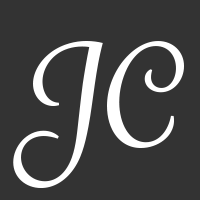
<style>
.page{position:relative;width:200px;height:200px;background:#333333}
.page>*{position:absolute;margin:0}
.t1{font:137px "GrafolitaScript-Medium";color:#ffffff}
</style>
<div class="page">
<p class="t1" style="left:13px;top:41px;width:171px;height:148px">JC</p>
</div>
